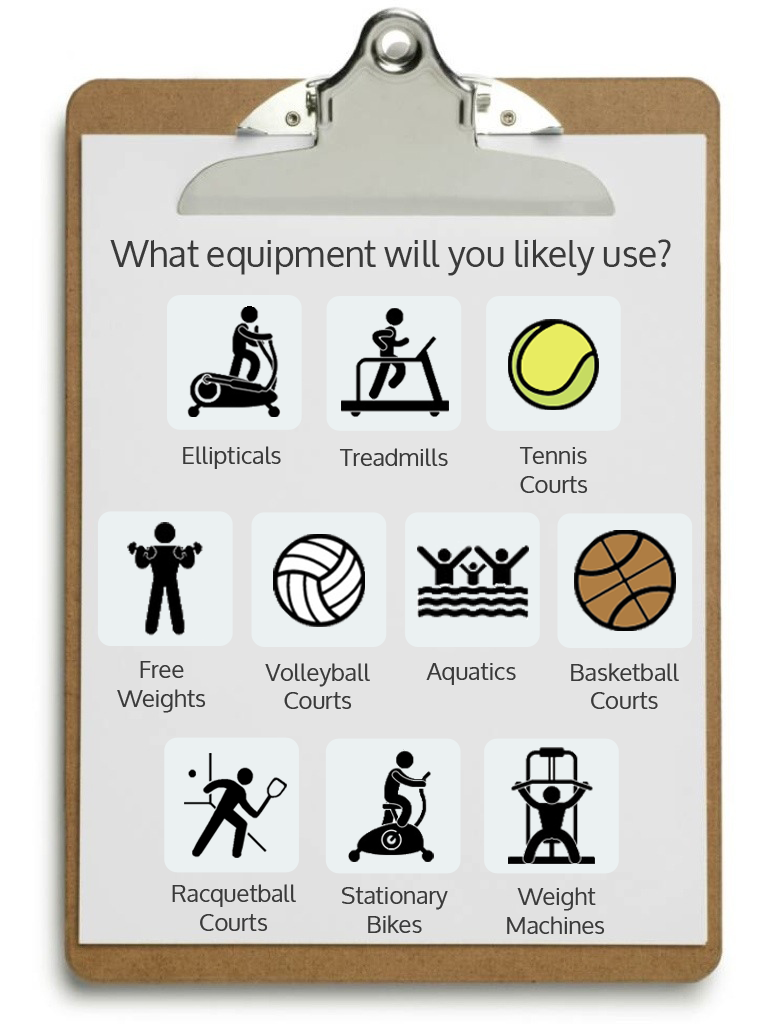
<style>
.page{position:relative;width:768px;height:1024px}
.page>*{position:absolute;margin:0}
.t1{font:36px "Oxygen";color:#3a3a3a}
.t2{font:24px "Oxygen";color:#3a3a3a}
</style>
<div class="page">
<p class="t1" style="left:110px;top:239px;width:561px;height:37px">What equipment will you likely use?</p>
<p class="t2" style="left:183px;top:446px;width:98px;height:23px">Ellipticals</p>
<p class="t2" style="left:339px;top:448px;width:109px;height:18px">Treadmills</p>
<p class="t2" style="left:519px;top:447px;width:69px;height:46px;text-align:center">Tennis<br>Courts</p>
<p class="t2" style="left:117px;top:661px;width:89px;height:52px;text-align:center">Free<br>Weights</p>
<p class="t2" style="left:265px;top:663px;width:105px;height:46px;text-align:center">Volleyball<br>Courts</p>
<p class="t2" style="left:426px;top:663px;width:90px;height:22px">Aquatics</p>
<p class="t2" style="left:571px;top:663px;width:108px;height:46px;text-align:center">Basketball<br>Courts</p>
<p class="t2" style="left:172px;top:884px;width:124px;height:47px;text-align:center">Racquetball<br>Courts</p>
<p class="t2" style="left:342px;top:887px;width:106px;height:46px;text-align:center">Stationary<br>Bikes</p>
<p class="t2" style="left:507px;top:887px;width:98px;height:47px;text-align:center">Weight<br>Machines</p>
</div>
